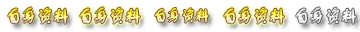
<style>
.page{position:relative;width:360px;height:32px;background:#ffffff}
.page>*{position:absolute;margin:0}
.t1{font:18px "FZSTK--GBK1-0";letter-spacing:-0.14em;font-weight:bold}
.t2{font:16px "FZSTK--GBK1-0";letter-spacing:-0.14em;font-weight:bold}
.t3{font:18px "FZSTK--GBK1-0";letter-spacing:-0.14em;color:#f1f1f1;font-weight:bold}
</style>
<div class="page">
<p class="t1" style="left:8px;top:7px;width:60px;height:17px">自身资料</p>
<p class="t1" style="left:80px;top:7px;width:60px;height:17px">自身资料</p>
<p class="t2" style="left:155px;top:8px;width:54px;height:15px">自身资料</p>
<p class="t1" style="left:224px;top:7px;width:60px;height:17px">自身资料</p>
<p class="t3" style="left:296px;top:7px;width:60px;height:17px">自身资料</p>
</div>
